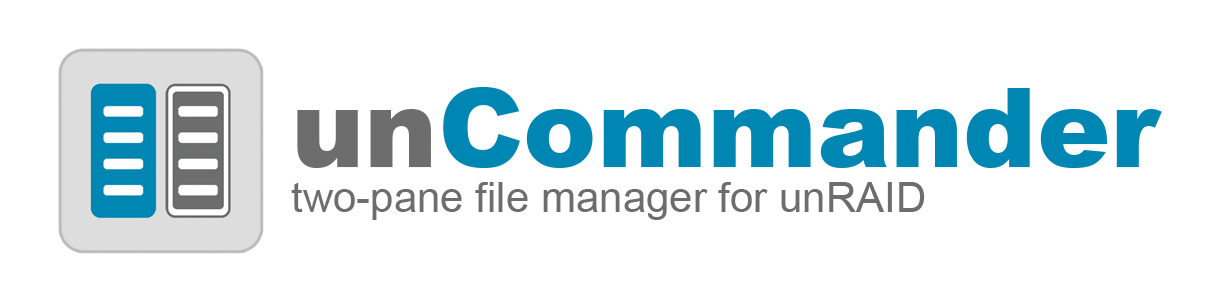
<style>
.page{position:relative;width:1212px;height:300px;background:#ffffff}
.page>*{position:absolute;margin:0}
.t1{font:110px "Arial-Black";color:#0086b3}
.t2{font:110px "Arial-Black";color:#6d6d6d}
.t3{font:42px "ArialMT";color:#6d6d6d}
</style>
<div class="page">
<p class="t1" style="left:297px;top:87px;width:865px;height:81px"><span class="t2">un</span>Commander</p>
<p class="t3" style="left:291px;top:182px;width:634px;height:38px">two-pane file manager for unRAID</p>
</div>
